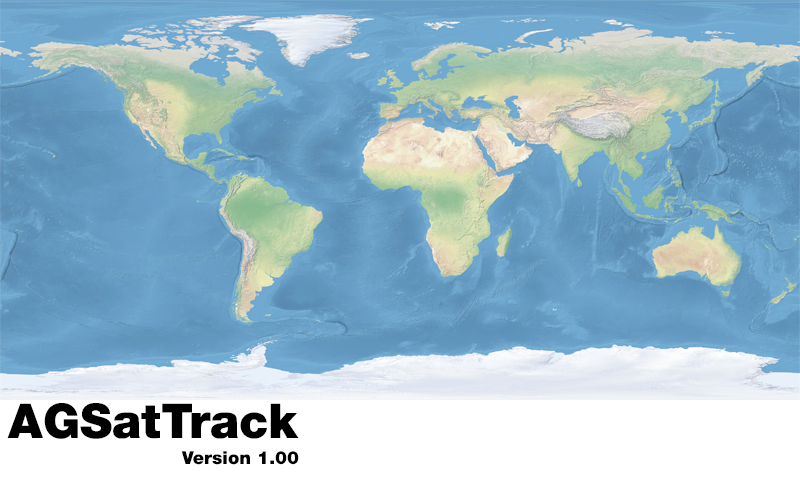
<style>
.page{position:relative;width:800px;height:480px}
.page>*{position:absolute;margin:0}
.t1{font:48px "Helvetica95-Black";color:#000000}
.t2{font:18px "Helvetica95-Black";color:#000000}
</style>
<div class="page">
<p class="t1" style="left:7px;top:403px;width:292px;height:36px">AGSatTrack</p>
<p class="t2" style="left:181px;top:451px;width:118px;height:14px">Version 1.00</p>
</div>
